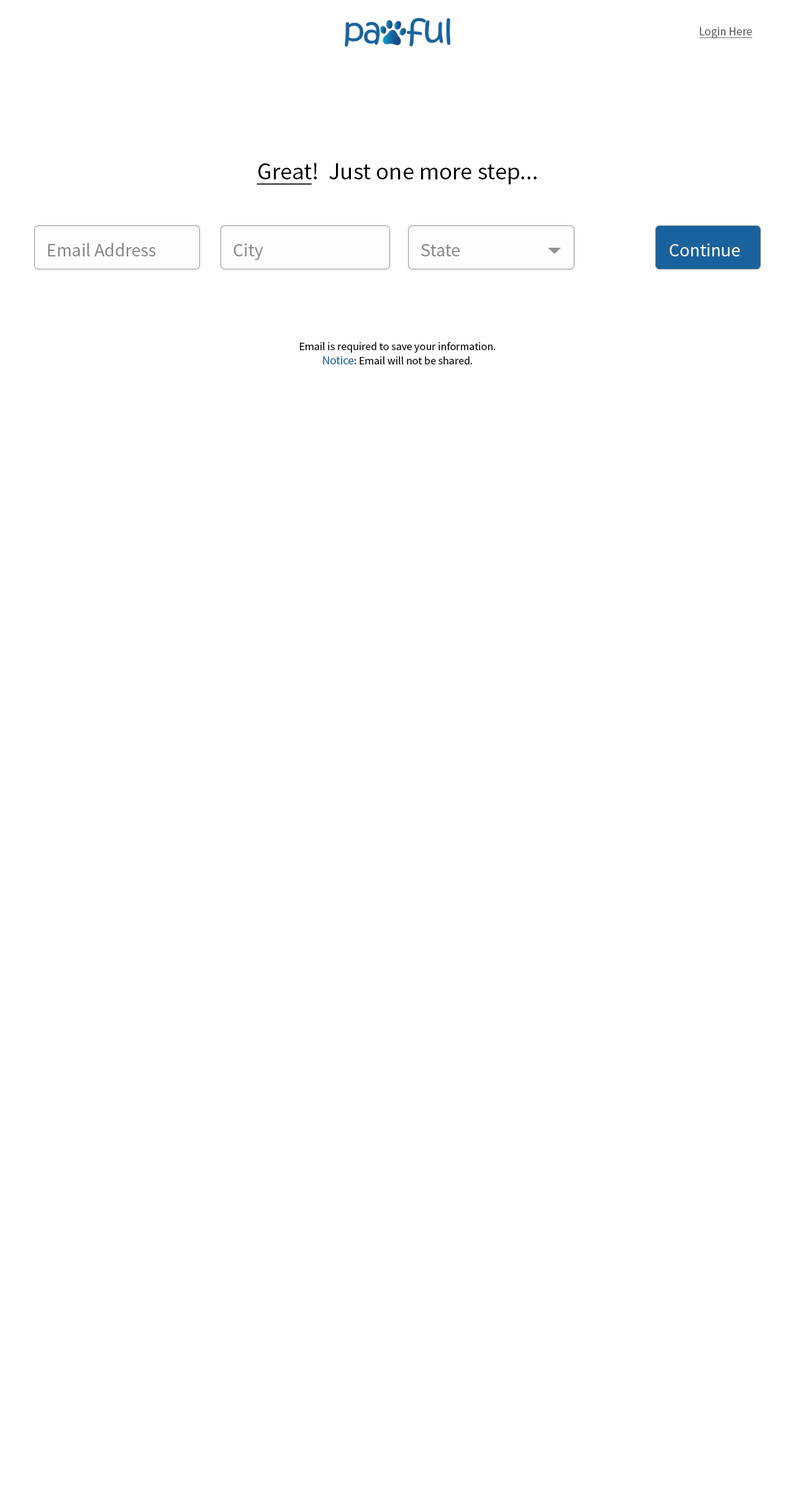
<style>
.page{position:relative;width:795px;height:1500px;background:#ffffff}
.page>*{position:absolute;margin:0}
.t1{font:11.8px "SourceSansPro-Regular";color:#636363;text-decoration:underline}
.t2{font:24.2px "SourceSansPro-Regular";color:#000000}
.t3{font:24.2px "SourceSansPro-Regular";color:#000000;text-decoration:underline}
.t4{font:18.6px "SourceSansPro-Regular";color:#878686}
.t5{font:18.6px "SourceSansPro-Regular";color:#ffffff}
.t6{font:11.2px "SourceSansPro-Regular";color:#000000}
.t7{font:11.8px "SourceSansPro-Regular";color:#1a629e}
</style>
<div class="page">
<p class="t1" style="left:699px;top:27px;width:54px;height:11px">Login Here</p>
<p class="t2" style="left:256px;top:163px;width:281px;height:22px"><span class="t3">Great</span>!  Just one more step...</p>
<p class="t4" style="left:48px;top:243px;width:108px;height:13px">Email Address</p>
<p class="t4" style="left:233px;top:243px;width:30px;height:17px">City</p>
<p class="t4" style="left:421px;top:244px;width:39px;height:12px">State</p>
<p class="t5" style="left:669px;top:243px;width:71px;height:13px">Continue</p>
<p class="t6" style="left:300px;top:342px;width:196px;height:23px;text-align:center">Email is required to save your information.<br><span class="t7">Notice</span>: Email will not be shared.</p>
</div>
